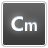
<style>
.page{position:relative;width:48px;height:48px}
.page>*{position:absolute;margin:0}
.t1{font:20.2px "MicrosoftYaHei-Bold";color:#ffffff}
.t2{font:15.8px "MicrosoftYaHei-Bold";color:#ffffff;scale:0.9 1}
</style>
<div class="page">
<p class="t1" style="left:11px;top:16px;width:26px;height:15px">C<span class="t2">m</span></p>
</div>
